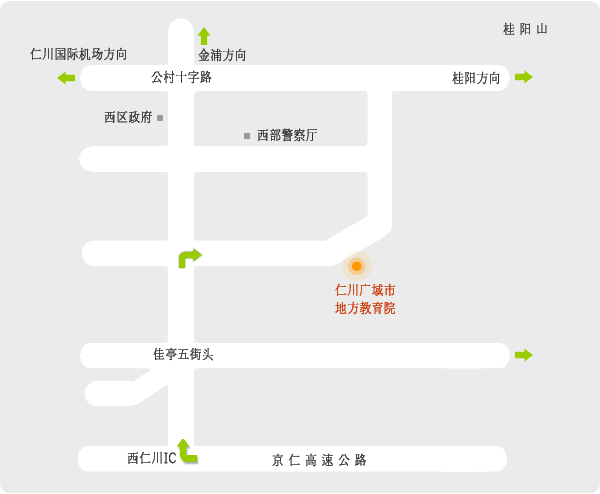
<style>
.page{position:relative;width:600px;height:494px;background:#ebebeb}
.page>*{position:absolute;margin:0}
.t1{font:14px "Haansoft-Batang";color:#333333;font-weight:bold;scale:0.85 1}
.t2{font:14px/18px "Haansoft-Batang";color:#cc3300;font-weight:bold;scale:0.85 1}
</style>
<div class="page">
<p class="t1" style="left:503px;top:22px;width:44px;height:14px">桂 阳 山</p>
<p class="t1" style="left:30px;top:47px;width:97px;height:14px">仁川国际机场方向</p>
<p class="t1" style="left:198px;top:48px;width:48px;height:14px">金浦方向</p>
<p class="t1" style="left:151px;top:70px;width:61px;height:14px">公村十字路</p>
<p class="t1" style="left:452px;top:71px;width:48px;height:14px">桂阳方向</p>
<p class="t1" style="left:104px;top:110px;width:48px;height:14px">西区政府</p>
<p class="t1" style="left:257px;top:128px;width:60px;height:14px">西部警察厅</p>
<p class="t2" style="left:335px;top:283px;width:60px;height:32px">仁川广域市<br>地方教育院</p>
<p class="t1" style="left:153px;top:347px;width:60px;height:14px">佳亭五街头</p>
<p class="t1" style="left:127px;top:451px;width:49px;height:13px">西仁川IC</p>
<p class="t1" style="left:272px;top:453px;width:94px;height:14px">京 仁 高 速 公 路</p>
</div>
